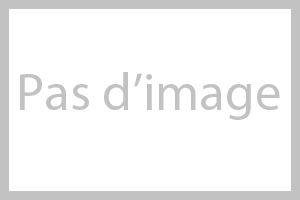
<style>
.page{position:relative;width:300px;height:200px;background:#ffffff}
.page>*{position:absolute;margin:0}
.t1{font:53px "MyriadPro-Regular";color:#c2c2c2}
</style>
<div class="page">
<p class="t1" style="left:20px;top:72px;width:260px;height:48px">Pas d’image</p>
</div>
